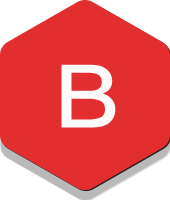
<style>
.page{position:relative;width:170px;height:200px;background:#e22e2e}
.page>*{position:absolute;margin:0}
.t1{font:86px "HelveticaExt-Normal";color:#fffbfa}
</style>
<div class="page">
<p class="t1" style="left:61px;top:64px;width:55px;height:64px">B</p>
</div>
